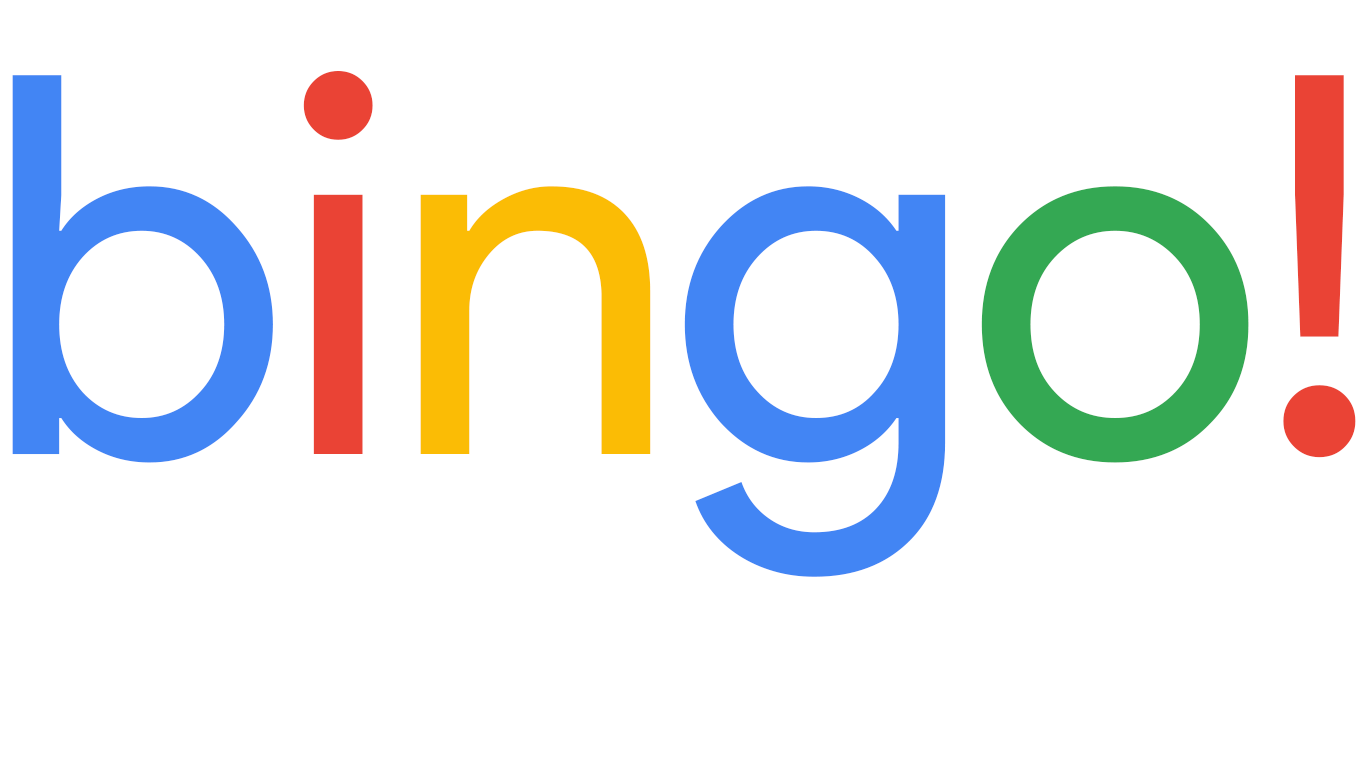
<style>
.page{position:relative;width:1366px;height:768px;background:#ffffff}
.page>*{position:absolute;margin:0}
.t1{font:529.1px "ProductSans-Regular";letter-spacing:-0.01em;color:#4285f4}
.t2{font:529.1px "ProductSans-Regular";letter-spacing:-0.01em;color:#ea4335}
.t3{font:529.1px "ProductSans-Regular";letter-spacing:-0.01em;color:#fbbc05}
.t4{font:529.1px "ProductSans-Regular";letter-spacing:-0.01em;color:#34a853}
</style>
<div class="page">
<p class="t1" style="left:12px;top:71px;width:1344px;height:506px">b<span class="t2">i</span><span class="t3">n</span>g<span class="t4">o</span><span class="t2">!</span></p>
</div>
